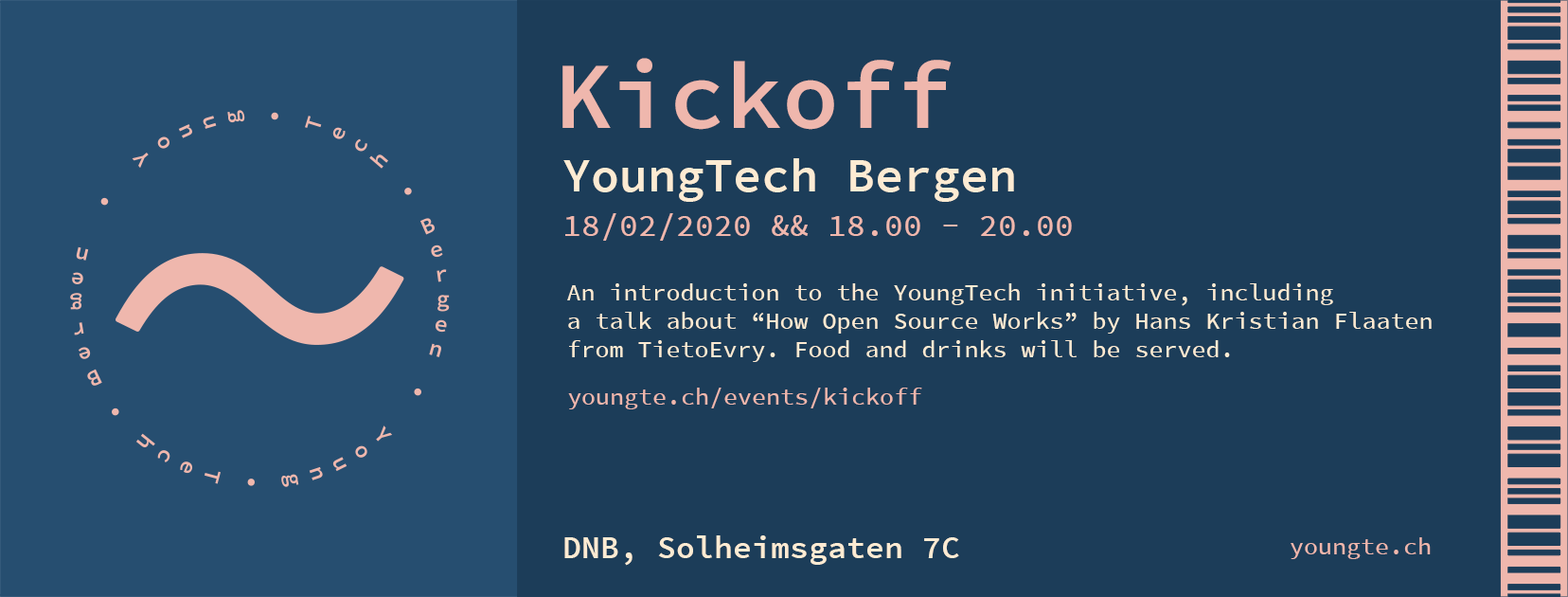
<style>
.page{position:relative;width:1568px;height:597px;background:#1c3d59}
.page>*{position:absolute;margin:0}
.t1{font:94.7px "SourceCodePro-Semibold";color:#efb7ad}
.t2{font:47.3px "SourceCodePro-Semibold";color:#fdebd3}
.t3{font:31.6px "SourceCodePro-Medium";color:#efb7ad}
.t4{font:23.7px "SourceCodePro-Medium";color:#fdebd3}
.t5{font:23.7px "SourceCodePro-Medium";color:#efb7ad}
.t6{font:31.6px "SourceCodePro-Semibold";color:#fdebd3}
</style>
<div class="page">
<p class="t1" style="left:562px;top:58px;width:390px;height:72px">Kickoff</p>
<p class="t2" style="left:563px;top:158px;width:451px;height:44px">YoungTech Bergen</p>
<p class="t3" style="left:565px;top:213px;width:507px;height:28px">18/02/2020 &amp;&amp; 18.00 - 20.00</p>
<p class="t4" style="left:567px;top:283px;width:865px;height:79px">An introduction to the YoungTech initiative, including<br>a talk about “How Open Source Works” by Hans Kristian Flaaten<br>from TietoEvry. Food and drinks will be served.</p>
<p class="t5" style="left:568px;top:387px;width:354px;height:22px">youngte.ch/events/kickoff</p>
<p class="t6" style="left:564px;top:535px;width:395px;height:30px">DNB, Solheimsgaten 7C</p>
<p class="t5" style="left:1291px;top:537px;width:140px;height:22px">youngte.ch</p>
</div>
